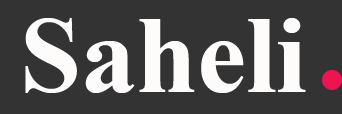
<style>
.page{position:relative;width:342px;height:114px;background:#333333}
.page>*{position:absolute;margin:0}
.t1{font:110px "TimesNewRomanPS-BoldMT";color:#fefbfb}
</style>
<div class="page">
<p class="t1" style="left:25px;top:18px;width:281px;height:75px">Saheli</p>
</div>
